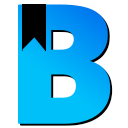
<style>
.page{position:relative;width:128px;height:128px;background:#ffffff}
.page>*{position:absolute;margin:0}
.t1{font:165.1px "OpenSans-ExtraBold";font-weight:bold}
</style>
<div class="page">
<p class="t1" style="left:20px;top:6px;width:93px;height:120px">B</p>
</div>
